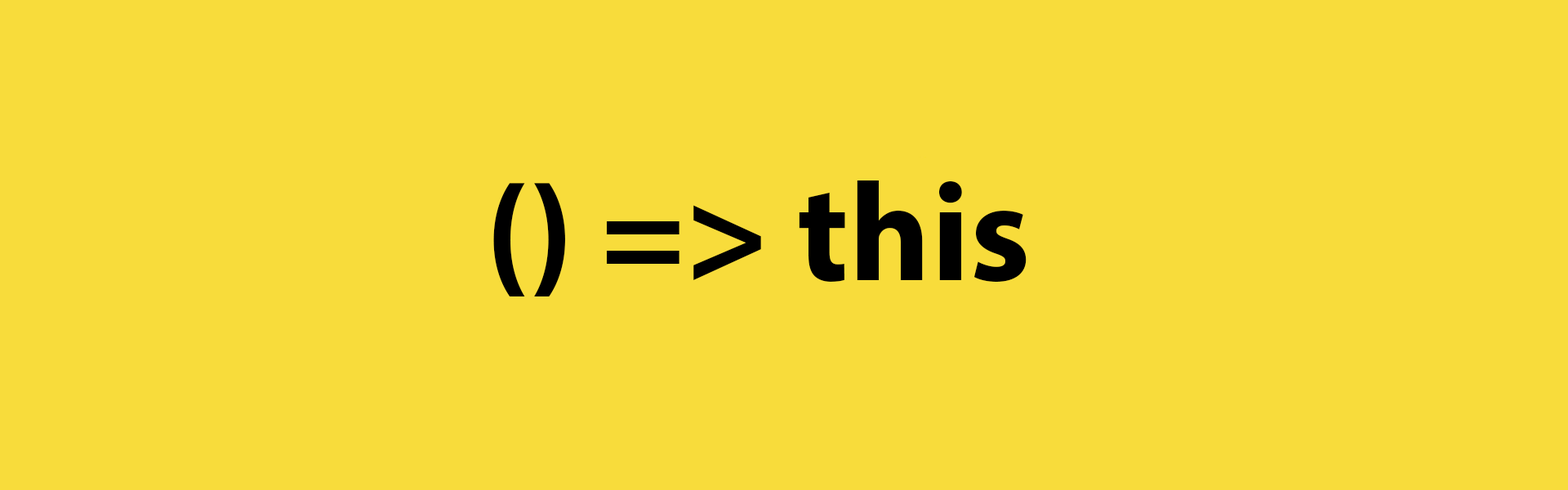
<style>
.page{position:relative;width:1568px;height:490px;background:#f8dc3b}
.page>*{position:absolute;margin:0}
.t1{font:140.5px "MyriadPro-Bold";color:#000000}
</style>
<div class="page">
<p class="t1" style="left:493px;top:180px;width:534px;height:116px">() =&gt; this</p>
</div>
